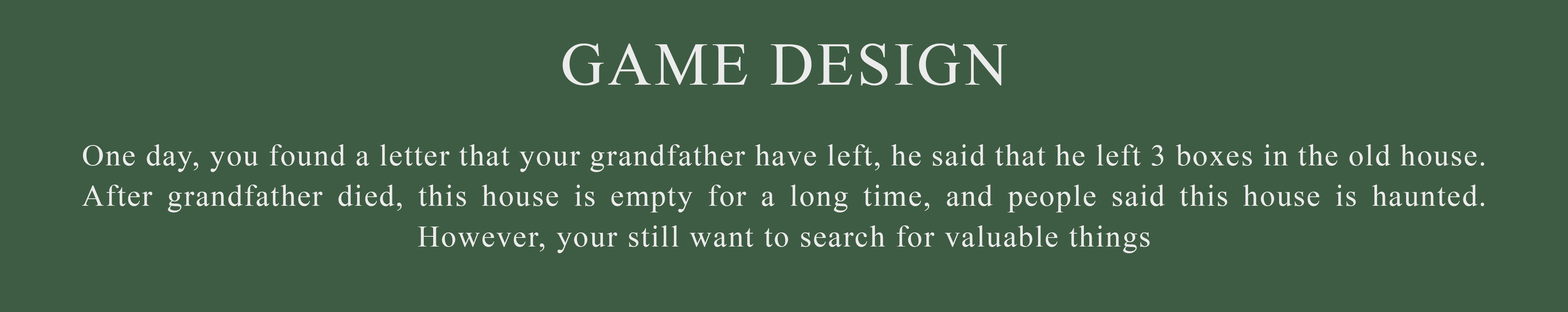
<style>
.page{position:relative;width:1568px;height:312px;background:#3e5c43}
.page>*{position:absolute;margin:0}
.t1{font:60.8px "TimesNewRomanPSMT";letter-spacing:0.05em;color:#ebebeb}
.t2{font:30.4px/40.5px "TimesNewRomanPSMT";letter-spacing:0.05em;color:#ebebeb}
</style>
<div class="page">
<p class="t1" style="left:563px;top:44px;width:444px;height:41px">GAME DESIGN</p>
<p class="t2" style="left:82px;top:144px;width:1402px;height:109px;text-align:justify">One day, you found a letter that your grandfather have left, he said that he left 3 boxes in the old house. After grandfather died, this house is empty for a long time, and people said this house is haunted. However, your still want to search for valuable things</p>
</div>
